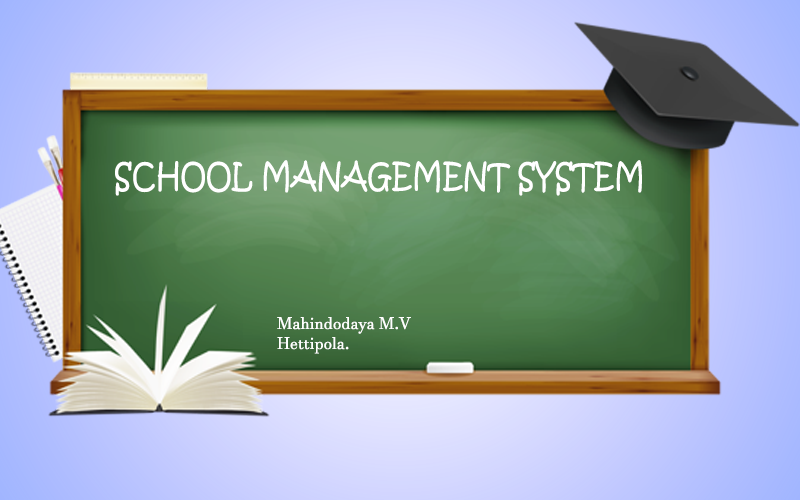
<style>
.page{position:relative;width:800px;height:500px}
.page>*{position:absolute;margin:0}
.t1{font:33.8px "KristenITC-Regular";color:#ffffff;scale:0.85 1}
.t2{font:45.1px "KristenITC-Regular";color:#ffffff;scale:0.85 1}
.t3{font:16.7px "JavaneseText";color:#ffffff}
</style>
<div class="page">
<p class="t1" style="left:115px;top:160px;width:527px;height:36px"><span class="t2"><br></span>SCHOOL MANAGEMENT SYSTEM</p>
<p class="t3" style="left:277px;top:317px;width:134px;height:37px">Mahindodaya M.V<br>Hettipola.</p>
</div>
